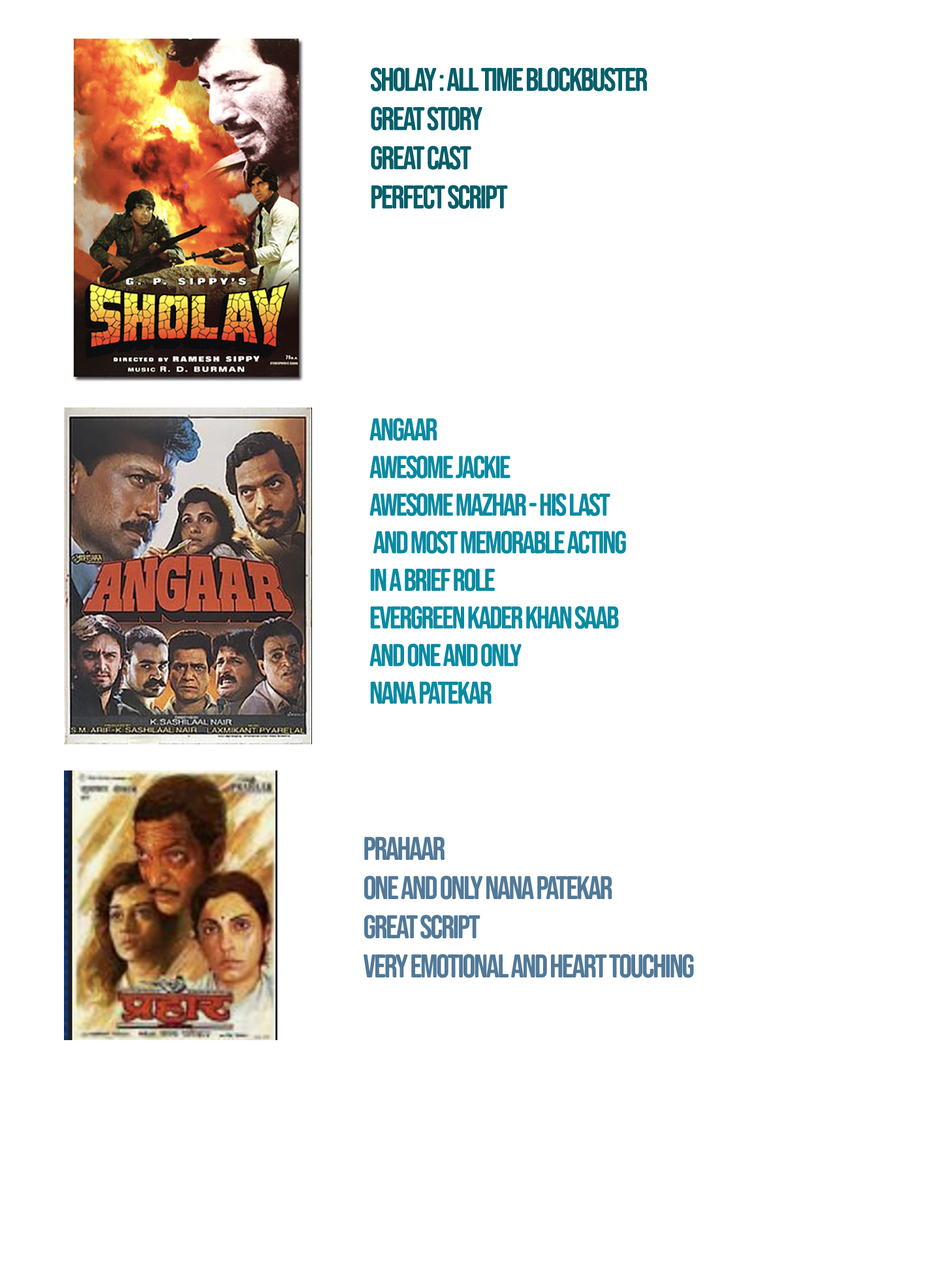
<style>
.page{position:relative;width:940px;height:1268px;background:#ffffff}
.page>*{position:absolute;margin:0}
.t1{font:32.6px "BebasNeueSemiRounded-Regular";letter-spacing:-0.05em;color:#055e69}
.t2{font:31.3px "BebasNeueSemiRounded-Regular";letter-spacing:-0.05em;color:#098aa1}
.t3{font:32.6px "BebasNeueSemiRounded-Regular";letter-spacing:-0.05em;color:#527997}
</style>
<div class="page">
<p class="t1" style="left:371px;top:67px;width:277px;height:142px">Sholay : All Time Blockbuster<br>great story<br>great cast<br>perfect script</p>
<p class="t2" style="left:370px;top:418px;width:256px;height:286px">ANGAAR<br>Awesome Jackie<br>awesome Mazhar - His Last<br> and most memorable Acting<br>in a brief role<br>evergreen Kader Khan saab<br>and One and only<br>Nana Patekar</p>
<p class="t3" style="left:364px;top:836px;width:330px;height:142px">Prahaar <br>one and only nana patekar<br>great script<br>very emotional and heart touching</p>
</div>
